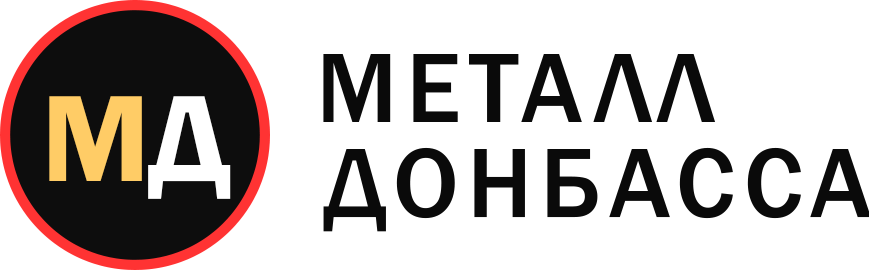
<style>
.page{position:relative;width:869px;height:270px;background:#ffffff}
.page>*{position:absolute;margin:0}
.t1{font:101.9px "FranklinGothic-Medium";letter-spacing:0.08em;color:#0a0a0a}
.t2{font:127.4px "FranklinGothic-Demi";color:#ffcc66}
.t3{font:127.4px "FranklinGothic-Demi";color:#ffffff}
</style>
<div class="page">
<p class="t1" style="left:323px;top:54px;width:393px;height:68px">МЕТАЛЛ</p>
<p class="t2" style="left:49px;top:96px;width:182px;height:103px">М<span class="t3">Д</span></p>
<p class="t1" style="left:323px;top:147px;width:548px;height:85px">ДОНБАССА</p>
</div>
